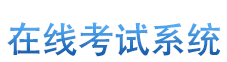
<style>
.page{position:relative;width:227px;height:62px;background:#ffffff}
.page>*{position:absolute;margin:0}
.t1{font:36px "AdobeHeitiStd-Regular"}
</style>
<div class="page">
<p class="t1" style="left:7px;top:22px;width:214px;height:35px">在线考试系统</p>
</div>
